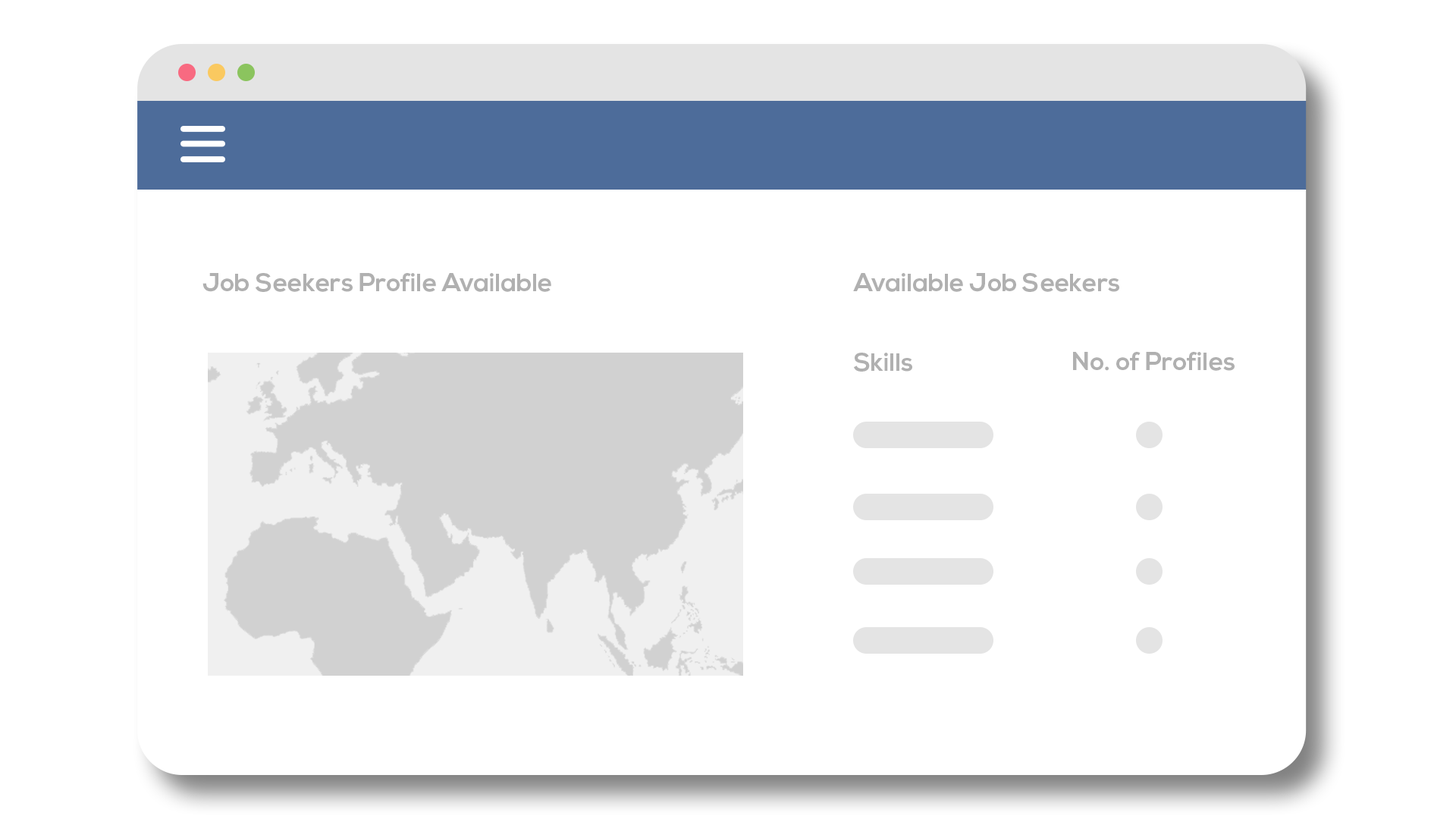
<style>
.page{position:relative;width:1456px;height:819px;background:#ffffff}
.page>*{position:absolute;margin:0}
.t1{font:25.3px "NexaBold";color:#b0b0b0}
</style>
<div class="page">
<p class="t1" style="left:202px;top:273px;width:349px;height:19px">Job Seekers Profile Available</p>
<p class="t1" style="left:853px;top:273px;width:266px;height:19px">Available Job Seekers</p>
<p class="t1" style="left:854px;top:353px;width:58px;height:19px">Skills</p>
<p class="t1" style="left:1073px;top:352px;width:162px;height:19px">No. of Profiles</p>
</div>
